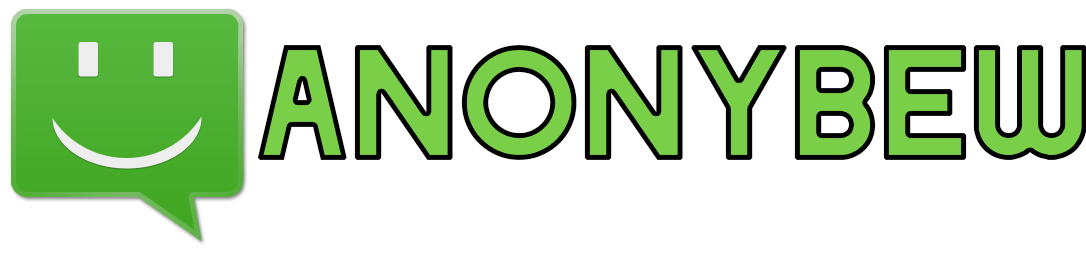
<style>
.page{position:relative;width:1086px;height:256px;background:#ffffff}
.page>*{position:absolute;margin:0}
.t1{font:140px "DODGE";letter-spacing:0.02em;font-weight:bold}
</style>
<div class="page">
<p class="t1" style="left:257px;top:45px;width:830px;height:115px">Anonybew</p>
</div>
